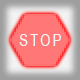
<style>
.page{position:relative;width:80px;height:80px;background:#ff7777}
.page>*{position:absolute;margin:0}
.t1{font:16.7px "ArialMT";letter-spacing:0.16em;color:#f2f2f2;scale:0.8 1}
</style>
<div class="page">
<p class="t1" style="left:19px;top:34px;width:42px;height:12px">STOP</p>
</div>
